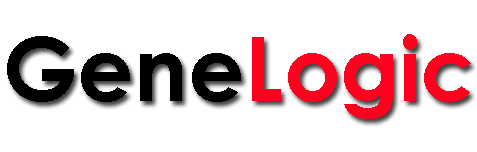
<style>
.page{position:relative;width:477px;height:152px;background:#ffffff}
.page>*{position:absolute;margin:0}
.t1{font:88.9px "CenturyGothic-Bold";color:#ff001e}
.t2{font:88.9px "CenturyGothic-Bold";color:#000000}
</style>
<div class="page">
<p class="t1" style="left:7px;top:34px;width:464px;height:85px"><span class="t2">Gene</span>Logic</p>
</div>
